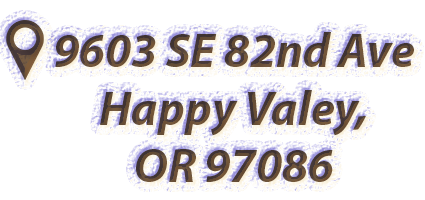
<style>
.page{position:relative;width:425px;height:200px;background:#ffffff}
.page>*{position:absolute;margin:0}
.t1{font:48px "MyriadPro-BoldIt"}
</style>
<div class="page">
<p class="t1" style="left:55px;top:32px;width:359px;height:150px;text-align:center">9603 SE 82nd Ave<br>Happy Valey,<br>OR 97086</p>
</div>
